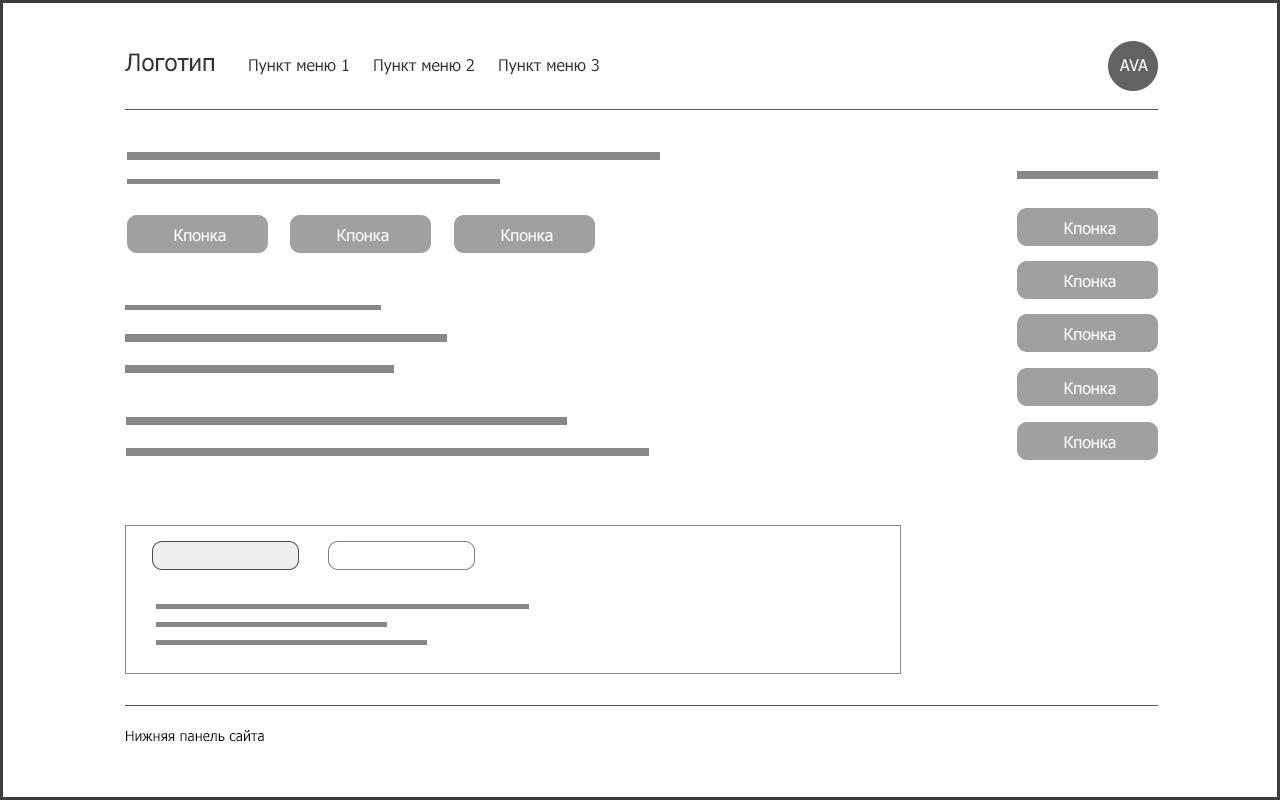
<style>
.page{position:relative;width:1280px;height:800px;background:#ffffff}
.page>*{position:absolute;margin:0}
.t1{font:24px "Tahoma";color:#333333}
.t2{font:16px "Tahoma";color:#333333}
.t3{font:16px "Tahoma";color:#ffffff}
.t4{font:14px "Tahoma";color:#000000}
</style>
<div class="page">
<p class="t1" style="left:125px;top:53px;width:89px;height:19px">Логотип</p>
<p class="t2" style="left:249px;top:59px;width:100px;height:16px">Пункт меню 1</p>
<p class="t2" style="left:374px;top:59px;width:100px;height:16px">Пункт меню 2</p>
<p class="t2" style="left:499px;top:59px;width:100px;height:16px">Пункт меню 3</p>
<p class="t3" style="left:1120px;top:59px;width:28px;height:12px">AVA</p>
<p class="t3" style="left:1064px;top:222px;width:52px;height:13px">Кпонка</p>
<p class="t3" style="left:174px;top:229px;width:52px;height:13px">Кпонка</p>
<p class="t3" style="left:337px;top:229px;width:52px;height:13px">Кпонка</p>
<p class="t3" style="left:501px;top:229px;width:52px;height:13px">Кпонка</p>
<p class="t3" style="left:1064px;top:275px;width:52px;height:13px">Кпонка</p>
<p class="t3" style="left:1064px;top:328px;width:52px;height:13px">Кпонка</p>
<p class="t3" style="left:1064px;top:382px;width:52px;height:13px">Кпонка</p>
<p class="t3" style="left:1064px;top:436px;width:52px;height:13px">Кпонка</p>
<p class="t4" style="left:126px;top:730px;width:138px;height:12px">Нижняя панель сайта</p>
</div>
